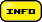
<style>
.page{position:relative;width:42px;height:22px;background:#fff200}
.page>*{position:absolute;margin:0}
.t1{font:14px "AcknowledgeTT-BRK-";color:#000000}
</style>
<div class="page">
<p class="t1" style="left:6px;top:9px;width:30px;height:5px">INFO</p>
</div>
